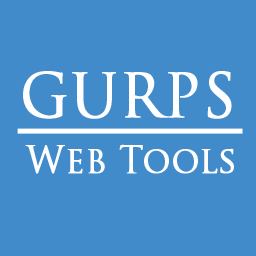
<style>
.page{position:relative;width:256px;height:256px;background:#428bca}
.page>*{position:absolute;margin:0}
.t1{font:60px "TrajanPro-Regular";color:#ffffff;font-weight:bold;scale:0.95 1}
.t2{font:36px "TrajanPro-Regular";color:#ffffff;font-weight:bold;scale:0.95 1}
</style>
<div class="page">
<p class="t1" style="left:23px;top:71px;width:209px;height:48px">GURPS</p>
<p class="t2" style="left:25px;top:144px;width:209px;height:30px">Web Tools</p>
</div>
